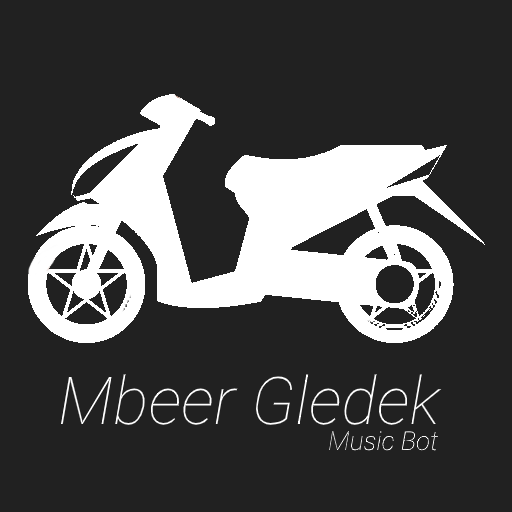
<style>
.page{position:relative;width:512px;height:512px;background:#212121}
.page>*{position:absolute;margin:0}
.t1{font:66px "Roboto-ThinItalic";color:#ffffff}
.t2{font:26px "Roboto-ThinItalic";color:#ffffff}
</style>
<div class="page">
<p class="t1" style="left:60px;top:374px;width:382px;height:51px">Mbeer Gledek</p>
<p class="t2" style="left:329px;top:431px;width:109px;height:20px">Music Bot</p>
</div>
